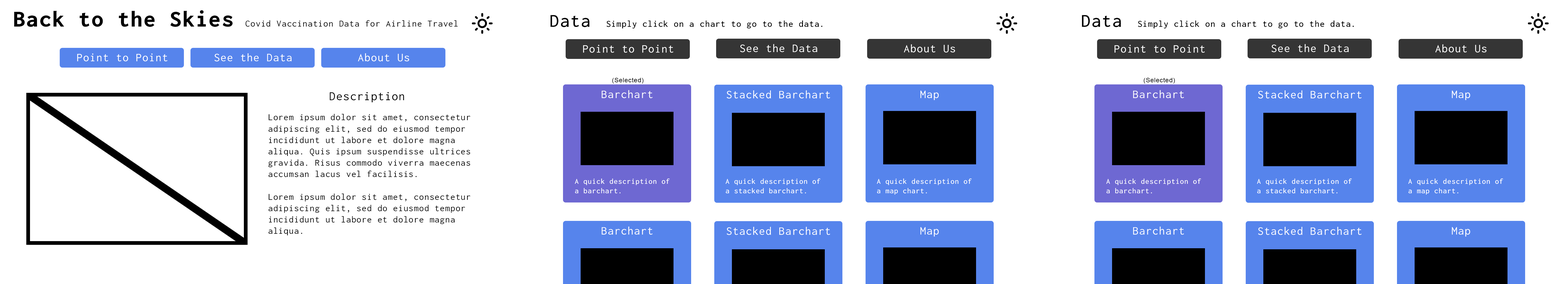
<style>
.page{position:relative;width:1568px;height:284px;background:#ffffff}
.page>*{position:absolute;margin:0}
.t1{font:23.7px "Inconsolata-ExtraBold";letter-spacing:0.05em;color:#000000}
.t2{font:18.9px "Inconsolata-Medium";letter-spacing:0.05em;color:#000000}
.t3{font:9.5px "Inconsolata-Regular";letter-spacing:0.05em;color:#000000}
.t4{font:9.5px "Inconsolata-Medium";letter-spacing:0.05em;color:#000000}
.t5{font:12px "Inconsolata-Regular";letter-spacing:0.05em;color:#ffffff}
.t6{font:6.3px "ArialMT";letter-spacing:0.05em;color:#000000}
.t7{font:12.6px "Inconsolata-Regular";letter-spacing:0.05em;color:#000000}
.t8{font:7.9px "Inconsolata-Medium";letter-spacing:0.05em;color:#ffffff}
</style>
<div class="page">
<p class="t1" style="left:14px;top:10px;width:219px;height:17px">Back to the Skies</p>
<p class="t2" style="left:550px;top:15px;width:40px;height:12px">Data</p>
<p class="t2" style="left:1082px;top:15px;width:39px;height:12px">Data</p>
<p class="t3" style="left:245px;top:20px;width:213px;height:7px">Covid Vaccination Data for Airline Travel</p>
<p class="t4" style="left:606px;top:21px;width:216px;height:8px">Simply click on a chart to go to the data.</p>
<p class="t4" style="left:1138px;top:21px;width:216px;height:8px">Simply click on a chart to go to the data.</p>
<p class="t5" style="left:77px;top:53px;width:91px;height:9px">Point to Point</p>
<p class="t5" style="left:214px;top:53px;width:78px;height:9px">See the Data</p>
<p class="t5" style="left:358px;top:53px;width:51px;height:9px">About Us</p>
<p class="t5" style="left:583px;top:45px;width:91px;height:8px">Point to Point</p>
<p class="t5" style="left:740px;top:44px;width:77px;height:8px">See the Data</p>
<p class="t5" style="left:904px;top:44px;width:51px;height:9px">About Us</p>
<p class="t5" style="left:1114px;top:45px;width:91px;height:8px">Point to Point</p>
<p class="t5" style="left:1272px;top:44px;width:77px;height:8px">See the Data</p>
<p class="t5" style="left:1435px;top:44px;width:51px;height:9px">About Us</p>
<p class="t6" style="left:612px;top:78px;width:32px;height:6px">(Selected)</p>
<p class="t6" style="left:1144px;top:78px;width:31px;height:6px">(Selected)</p>
<p class="t5" style="left:602px;top:90px;width:51px;height:8px">Barchart</p>
<p class="t5" style="left:1133px;top:90px;width:51px;height:8px">Barchart</p>
<p class="t7" style="left:330px;top:92px;width:74px;height:10px">Description</p>
<p class="t5" style="left:727px;top:90px;width:103px;height:9px">Stacked Barchart</p>
<p class="t5" style="left:920px;top:91px;width:19px;height:9px">Map</p>
<p class="t5" style="left:1258px;top:90px;width:104px;height:9px">Stacked Barchart</p>
<p class="t5" style="left:1452px;top:91px;width:18px;height:9px">Map</p>
<p class="t3" style="left:268px;top:114px;width:202px;height:121px">Lorem ipsum dolor sit amet, consectetur adipiscing elit, sed do eiusmod tempor incididunt ut labore et dolore magna aliqua. Quis ipsum suspendisse ultrices gravida. Risus commodo viverra maecenas accumsan lacus vel facilisis.<br><br>Lorem ipsum dolor sit amet, consectetur adipiscing elit, sed do eiusmod tempor incididunt ut labore et dolore magna aliqua.</p>
<p class="t8" style="left:575px;top:178px;width:95px;height:16px">A quick description of<br>a barchart.</p>
<p class="t8" style="left:726px;top:178px;width:95px;height:16px">A quick description of<br>a stacked barchart.</p>
<p class="t8" style="left:877px;top:178px;width:95px;height:17px">A quick description of<br>a map chart.</p>
<p class="t8" style="left:1106px;top:178px;width:95px;height:16px">A quick description of<br>a barchart.</p>
<p class="t8" style="left:1257px;top:178px;width:95px;height:16px">A quick description of<br>a stacked barchart.</p>
<p class="t8" style="left:1408px;top:178px;width:95px;height:17px">A quick description of<br>a map chart.</p>
<p class="t5" style="left:602px;top:227px;width:51px;height:8px">Barchart</p>
<p class="t5" style="left:727px;top:227px;width:103px;height:8px">Stacked Barchart</p>
<p class="t5" style="left:920px;top:227px;width:19px;height:10px">Map</p>
<p class="t5" style="left:1133px;top:227px;width:51px;height:8px">Barchart</p>
<p class="t5" style="left:1258px;top:227px;width:104px;height:8px">Stacked Barchart</p>
<p class="t5" style="left:1452px;top:227px;width:18px;height:10px">Map</p>
</div>
